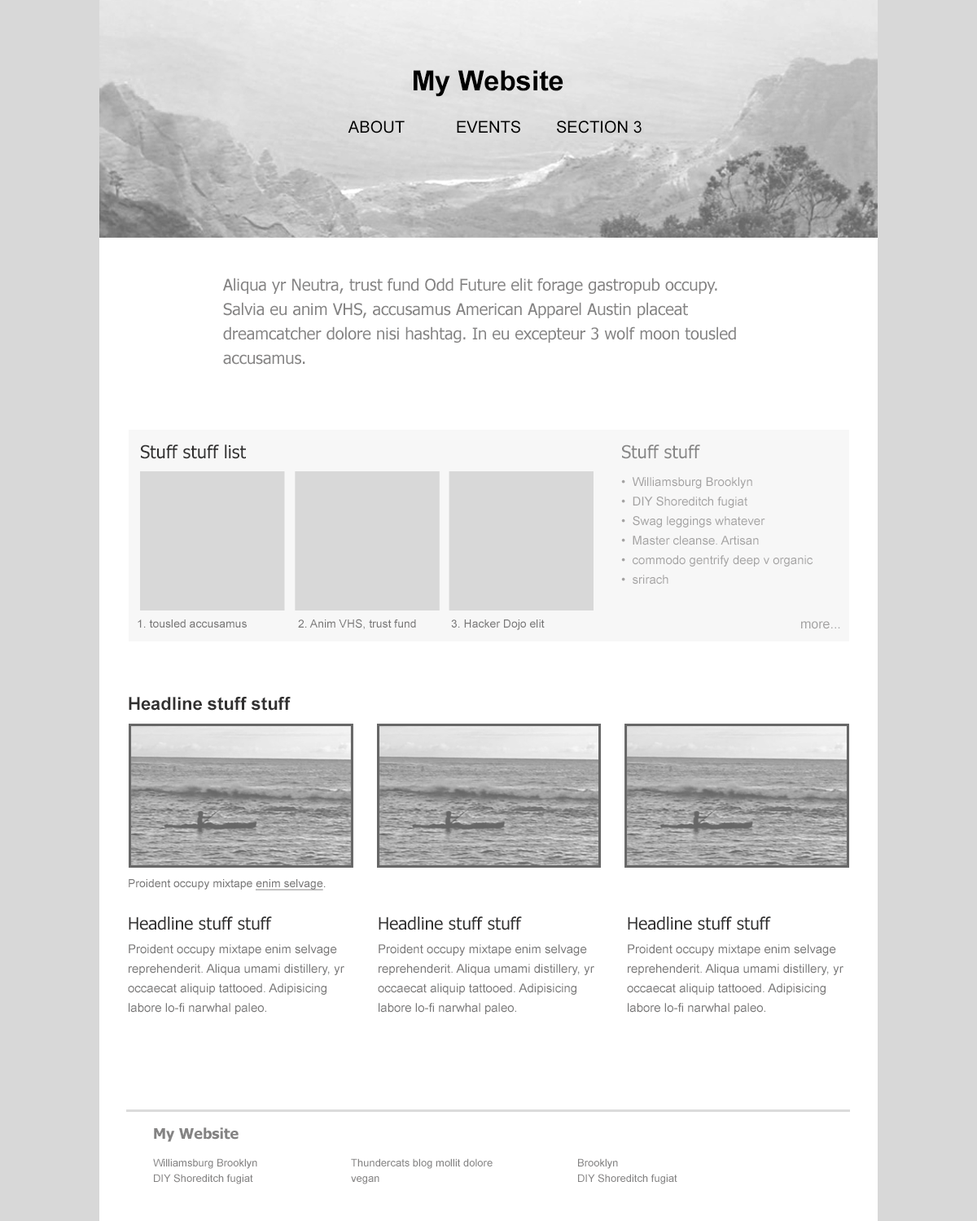
<style>
.page{position:relative;width:977px;height:1221px;background:#ffffff}
.page>*{position:absolute;margin:0}
.t1{font:27.7px "Arial-BoldMT";color:#000000}
.t2{font:16.3px "ArialMT";color:#000000;text-transform:uppercase}
.t3{font:16.3px/24.4px "Tahoma";color:#848383}
.t4{font:17.9px "Tahoma";color:#313030}
.t5{font:17.9px "Tahoma";color:#868686}
.t6{font:12.2px/19.5px "ArialMT";color:#a4a3a3}
.t7{font:11.4px "ArialMT";color:#787777}
.t8{font:13px "ArialMT";color:#a4a3a3}
.t9{font:17.9px "Arial-BoldMT";color:#313030}
.t10{font:11.4px "ArialMT";color:#787777;text-decoration:underline}
.t11{font:12.2px/19.5px "ArialMT";color:#787777}
.t12{font:17.1px "Tahoma";color:#313030}
.t13{font:14.7px "Tahoma-Bold";color:#848383}
.t14{font:10.6px/15.5px "ArialMT";color:#848383}
</style>
<div class="page">
<p class="t1" style="left:413px;top:70px;width:150px;height:27px">My Website</p>
<p class="t2" style="left:348px;top:120px;width:57px;height:13px">About</p>
<p class="t2" style="left:457px;top:120px;width:63px;height:13px">Events</p>
<p class="t2" style="left:557px;top:120px;width:84px;height:13px">Section 3</p>
<p class="t3" style="left:223px;top:278px;width:513px;height:87px">Aliqua yr Neutra, trust fund Odd Future elit forage gastropub occupy. Salvia eu anim VHS, accusamus American Apparel Austin placeat dreamcatcher dolore nisi hashtag. In eu excepteur 3 wolf moon tousled accusamus.</p>
<p class="t4" style="left:141px;top:444px;width:105px;height:15px">Stuff stuff list</p>
<p class="t5" style="left:622px;top:444px;width:78px;height:15px">Stuff stuff</p>
<p class="t6" style="left:621px;top:477px;width:192px;height:107px">•  Williamsburg Brooklyn<br>•  DIY Shoreditch fugiat<br>•  Swag leggings whatever<br>•  Master cleanse. Artisan <br>•  commodo gentrify deep v organic <br>•  srirach</p>
<p class="t7" style="left:138px;top:619px;width:109px;height:9px">1. tousled accusamus</p>
<p class="t7" style="left:298px;top:619px;width:118px;height:10px">2. Anim VHS, trust fund</p>
<p class="t7" style="left:451px;top:619px;width:94px;height:11px">3. Hacker Dojo elit</p>
<p class="t8" style="left:801px;top:621px;width:39px;height:8px">more...</p>
<p class="t9" style="left:129px;top:697px;width:162px;height:14px">Headline stuff stuff</p>
<p class="t7" style="left:129px;top:879px;width:197px;height:11px">Proident occupy mixtape <span class="t10">enim selvage</span>.</p>
<p class="t11" style="left:128px;top:916px;width:216px;height:98px"><span class="t12">Headline stuff stuff<br></span>Proident occupy mixtape enim selvage reprehenderit. Aliqua umami distillery, yr occaecat aliquip tattooed. Adipisicing labore lo-fi narwhal paleo.</p>
<p class="t11" style="left:378px;top:916px;width:216px;height:98px"><span class="t12">Headline stuff stuff<br></span>Proident occupy mixtape enim selvage reprehenderit. Aliqua umami distillery, yr occaecat aliquip tattooed. Adipisicing labore lo-fi narwhal paleo.</p>
<p class="t11" style="left:627px;top:916px;width:216px;height:98px"><span class="t12">Headline stuff stuff<br></span>Proident occupy mixtape enim selvage reprehenderit. Aliqua umami distillery, yr occaecat aliquip tattooed. Adipisicing labore lo-fi narwhal paleo.</p>
<p class="t13" style="left:154px;top:1127px;width:84px;height:15px">My Website</p>
<p class="t14" style="left:153px;top:1158px;width:104px;height:26px">Williamsburg Brooklyn<br>DIY Shoreditch fugiat</p>
<p class="t14" style="left:351px;top:1158px;width:141px;height:26px">Thundercats blog mollit dolore vegan</p>
<p class="t14" style="left:578px;top:1158px;width:99px;height:26px">Brooklyn<br>DIY Shoreditch fugiat</p>
</div>
